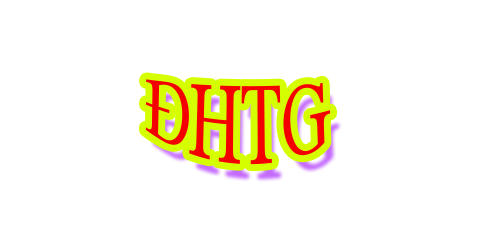
<style>
.page{position:relative;width:500px;height:250px;background:#ffffff}
.page>*{position:absolute;margin:0}
.t1{font:73.8px "TimesNewRomanPSMT";color:#f30000;scale:0.9 1}
</style>
<div class="page">
<p class="t1" style="left:145px;top:79px;width:186px;height:86px">ĐHTG</p>
</div>
